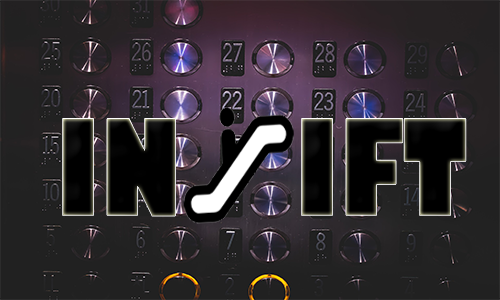
<style>
.page{position:relative;width:500px;height:300px}
.page>*{position:absolute;margin:0}
.t1{font:129.6px "GillSans-UltraBold";color:#000000;scale:0.71 1}
</style>
<div class="page">
<p class="t1" style="left:62px;top:118px;width:114px;height:98px">IN</p>
<p class="t1" style="left:301px;top:118px;width:165px;height:98px">IFT</p>
</div>
